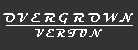
<style>
.page{position:relative;width:138px;height:50px;background:#333333}
.page>*{position:absolute;margin:0}
.t1{font:13.2px "Magneto-Bold";letter-spacing:0.25em;color:#ffffff}
.t2{font:10.5px "Magneto-Bold";letter-spacing:0.25em;color:#ffffff}
</style>
<div class="page">
<p class="t1" style="left:3px;top:13px;width:130px;height:11px">OVERGROWN</p>
<p class="t2" style="left:35px;top:29px;width:67px;height:8px">VERTUN</p>
</div>
